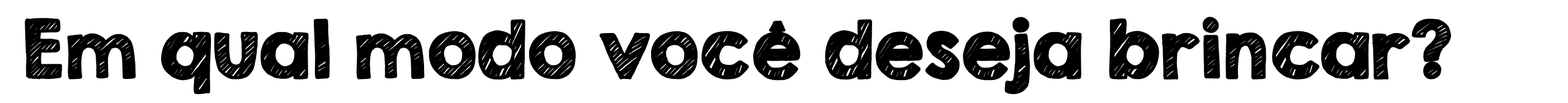
<style>
.page{position:relative;width:1568px;height:103px;background:#ffffff}
.page>*{position:absolute;margin:0}
.t1{font:69.9px "KGSecondChancesSketch";color:#000000;font-weight:bold}
</style>
<div class="page">
<p class="t1" style="left:25px;top:17px;width:1426px;height:78px">Em qual modo você deseja brincar?</p>
</div>
